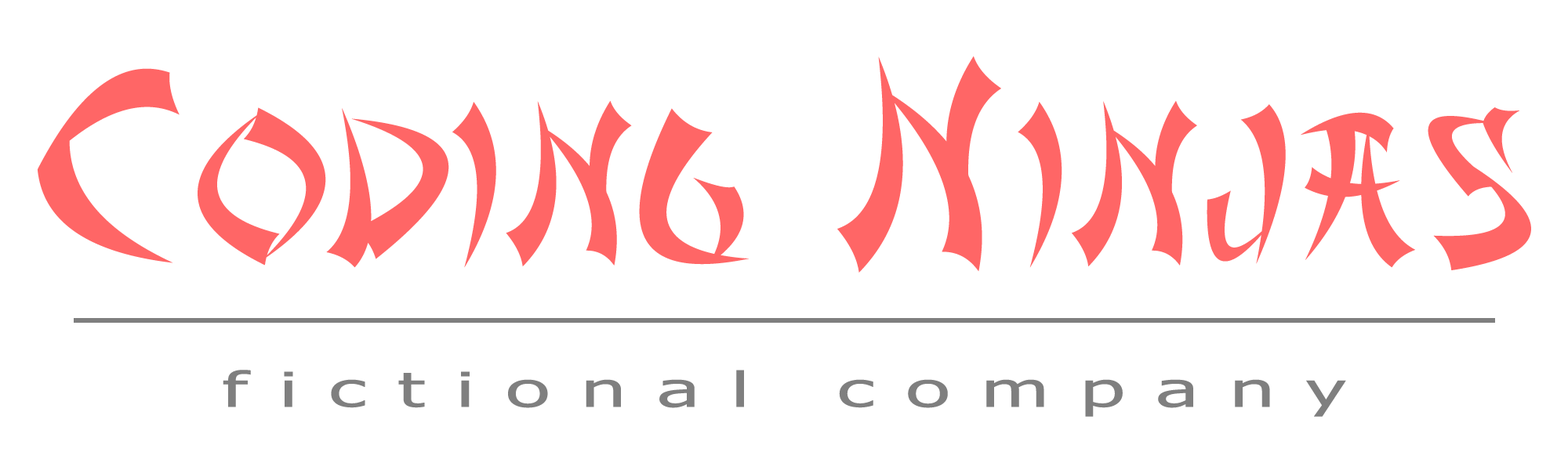
<style>
.page{position:relative;width:1568px;height:470px;background:#ffffff}
.page>*{position:absolute;margin:0}
.t1{font:202.4px "AsianDelight";letter-spacing:0.06em;color:#ff6666;scale:0.93 1}
.t2{font:264.6px "AsianDelight";letter-spacing:0.06em;color:#ff6666;scale:0.93 1}
.t3{font:48.2px "Tahoma";letter-spacing:0.392em;color:#7f7f7f;scale:1.67 1}
</style>
<div class="page">
<p class="t1" style="left:37px;top:56px;width:1494px;height:217px"><span class="t2">C</span>ODING<span class="t2"> N</span>INJAS</p>
<p class="t3" style="left:223px;top:370px;width:1123px;height:47px">fictional company</p>
</div>
